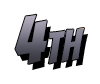
<style>
.page{position:relative;width:100px;height:84px;background:#ffffff}
.page>*{position:absolute;margin:0}
.t1{font:43.6px "Bangers-Regular"}
</style>
<div class="page">
<p class="t1" style="left:48px;top:28px;width:36px;height:36px;rotate:-5deg">th</p>
</div>
